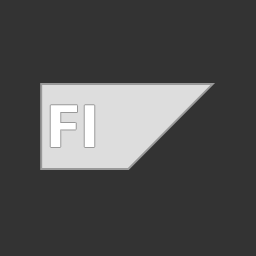
<style>
.page{position:relative;width:256px;height:256px;background:#333333}
.page>*{position:absolute;margin:0}
.t1{font:54.2px "AdobeGothicStd-Bold";color:#ffffff;scale:1.18 1}
</style>
<div class="page">
<p class="t1" style="left:50px;top:105px;width:45px;height:42px">FI</p>
</div>
